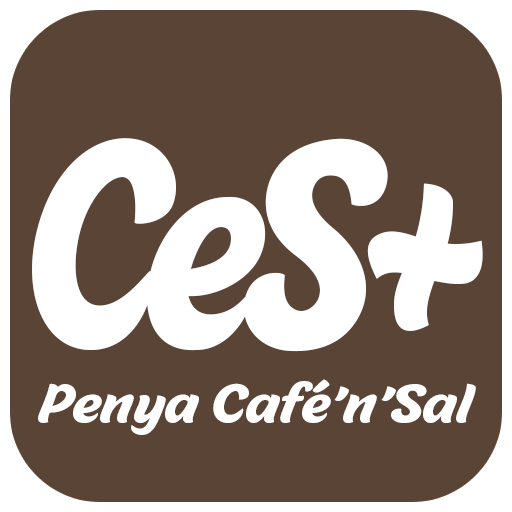
<style>
.page{position:relative;width:512px;height:512px;background:#5a4436}
.page>*{position:absolute;margin:0}
.t1{font:294px "MalvieTrial-Regular";letter-spacing:-0.075em;color:#ffffff;scale:0.75 1}
.t2{font:54.2px "MalvieTrial-Regular";color:#ffffff}
</style>
<div class="page">
<p class="t1" style="left:32px;top:138px;width:451px;height:214px">CeS+</p>
<p class="t2" style="left:38px;top:379px;width:438px;height:56px">Penya Café’n’Sal</p>
</div>
